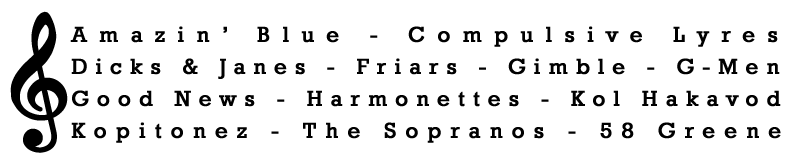
<style>
.page{position:relative;width:800px;height:163px;background:#ffffff}
.page>*{position:absolute;margin:0}
.t1{font:100px "NWCV15";letter-spacing:0.08em;color:#000000;font-weight:bold}
.t2{font:22px/32px "Rockwell";letter-spacing:0.345em;color:#000000;font-weight:bold}
.t3{font:22px/32px "Rockwell";letter-spacing:0.545em;color:#000000;font-weight:bold}
.t4{font:22px/32px "Rockwell";letter-spacing:0.35em;color:#000000;font-weight:bold}
.t5{font:22px/32px "Rockwell";letter-spacing:0.4em;color:#000000;font-weight:bold}
</style>
<div class="page">
<p class="t1" style="left:10px;top:11px;width:58px;height:142px">a</p>
<p class="t2" style="left:70px;top:26px;width:711px;height:117px"><span class="t3">Amazin’ Blue - Compulsive Lyres<br></span>Dicks &amp; Janes - Friars - Gimble - G-Men<br><span class="t4">Good News - Harmonettes - Kol Hakavod<br></span><span class="t5">Kopitonez - The Sopranos - 58 Greene</span></p>
</div>
